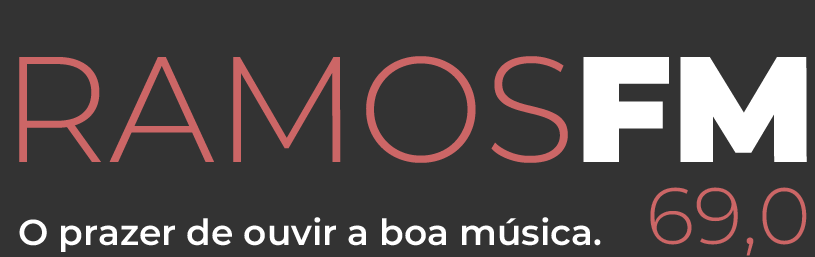
<style>
.page{position:relative;width:815px;height:257px;background:#333333}
.page>*{position:absolute;margin:0}
.t1{font:150px "Montserrat-Light";color:#cc6666}
.t2{font:150px "Montserrat-Black";color:#ffffff}
.t3{font:80px "Montserrat-Light";color:#cc6666}
.t4{font:36px "Montserrat-SemiBold";color:#ffffff}
</style>
<div class="page">
<p class="t1" style="left:19px;top:56px;width:788px;height:107px">RAMOS<span class="t2">FM</span></p>
<p class="t3" style="left:650px;top:187px;width:157px;height:69px">69,0</p>
<p class="t4" style="left:19px;top:217px;width:582px;height:35px">O prazer de ouvir a boa música.</p>
</div>
